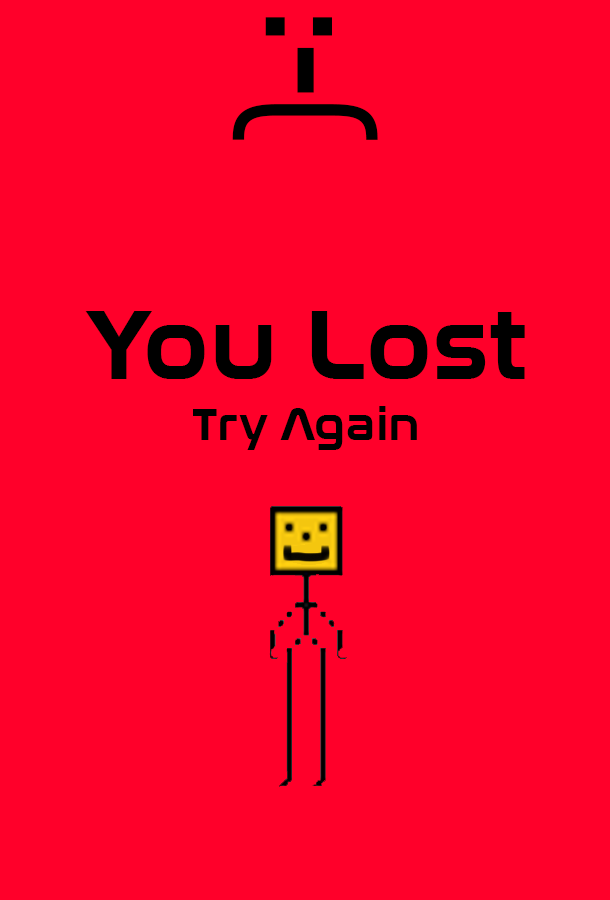
<style>
.page{position:relative;width:610px;height:900px;background:#ff002a}
.page>*{position:absolute;margin:0}
.t1{font:125px "NasalizationRg-Bold";color:#000000}
.t2{font:100px "NasalizationRg-Bold";color:#000000}
.t3{font:45.8px "NasalizationRg-Bold";color:#000000}
</style>
<div class="page">
<p class="t1" style="left:232px;top:17px;width:146px;height:123px;rotate:90deg">:-(</p>
<p class="t2" style="left:85px;top:311px;width:440px;height:68px">You Lost</p>
<p class="t3" style="left:193px;top:406px;width:224px;height:44px">Try Again</p>
</div>
